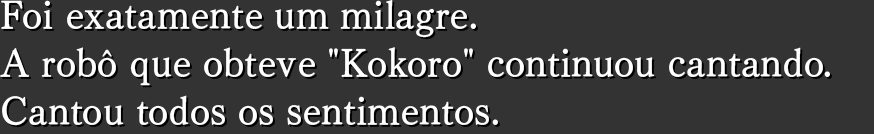
<style>
.page{position:relative;width:874px;height:134px;background:#333333}
.page>*{position:absolute;margin:0}
.t1{font:38.7px/48px "TelopMinPro-D";color:#ffffff}
</style>
<div class="page">
<p class="t1" style="left:0px;top:0px;width:830px;height:126px">Foi exatamente um milagre.<br>A robô que obteve "Kokoro" continuou cantando.<br>Cantou todos os sentimentos.</p>
</div>
